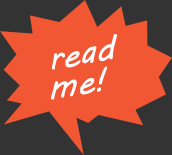
<style>
.page{position:relative;width:172px;height:155px;background:#f15733}
.page>*{position:absolute;margin:0}
.t1{font:34px/30px "MVBoli";color:#ffffff}
</style>
<div class="page">
<p class="t1" style="left:51px;top:34px;width:66px;height:66px">read<br>me!</p>
</div>
